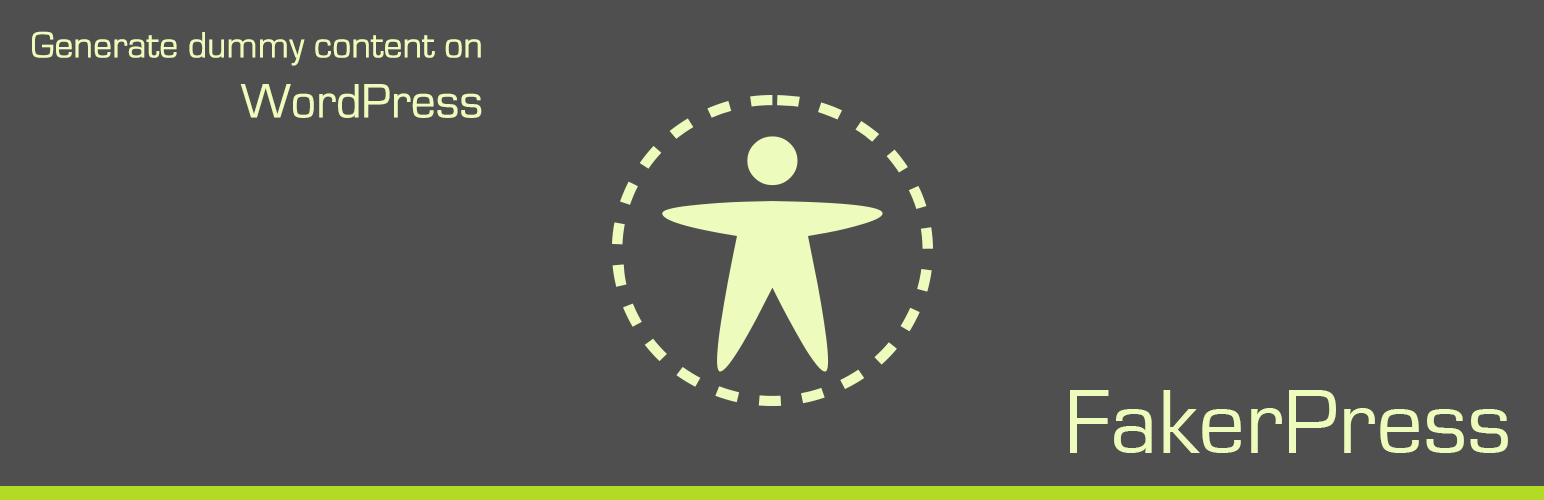
<style>
.page{position:relative;width:1544px;height:500px;background:#4f4f4f}
.page>*{position:absolute;margin:0}
.t1{font:38.1px "EurostileRegular";color:#edfbbc}
.t2{font:50px "EurostileRegular";color:#edfbbc}
.t3{font:94.1px "EurostileRegular";color:#edfbbc}
</style>
<div class="page">
<p class="t1" style="left:32px;top:31px;width:450px;height:87px;text-align:right">Generate dummy content on<br><span class="t2">WordPress</span></p>
<p class="t3" style="left:1070px;top:390px;width:438px;height:63px">FakerPress</p>
</div>
